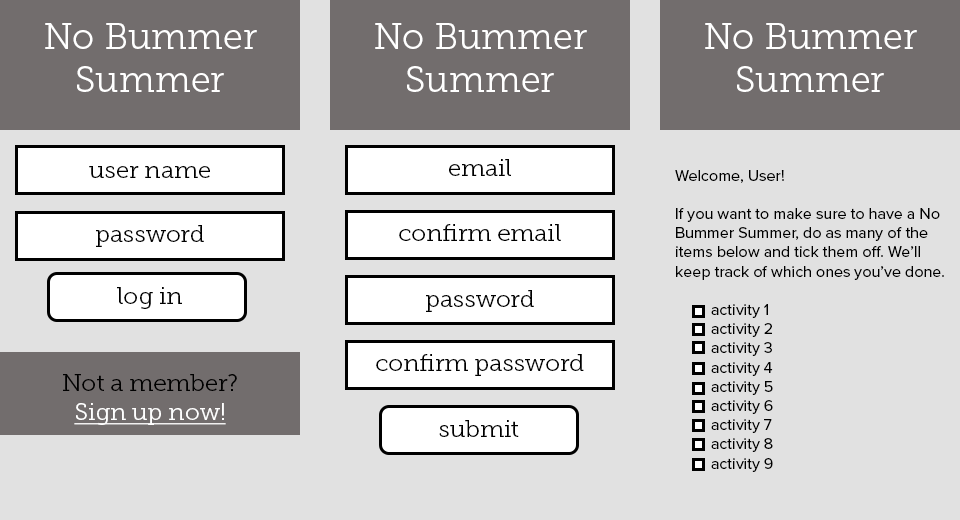
<style>
.page{position:relative;width:960px;height:520px;background:#e1e1e1}
.page>*{position:absolute;margin:0}
.t1{font:36px "MuseoSlab-300";color:#ffffff}
.t2{font:24px "MuseoSlab-300";color:#000000}
.t3{font:16px "ProximaNova-Regular";color:#000000}
</style>
<div class="page">
<p class="t1" style="left:45px;top:23px;width:212px;height:69px;text-align:center">No Bummer<br>Summer</p>
<p class="t1" style="left:375px;top:23px;width:212px;height:69px;text-align:center">No Bummer<br>Summer</p>
<p class="t1" style="left:705px;top:23px;width:212px;height:69px;text-align:center">No Bummer<br>Summer</p>
<p class="t2" style="left:449px;top:159px;width:62px;height:17px">email</p>
<p class="t2" style="left:89px;top:166px;width:121px;height:12px">user name</p>
<p class="t3" style="left:675px;top:170px;width:269px;height:302px">Welcome, User!<br><br>If you want to make sure to have a No Bummer Summer, do as many of the items below and tick them off. We’ll keep track of which ones you’ve done.<br><br> activity 1<br> activity 2<br> activity 3<br> activity 4<br> activity 5<br> activity 6<br> activity 7<br> activity 8<br> activity 9</p>
<p class="t2" style="left:96px;top:225px;width:108px;height:22px">password</p>
<p class="t2" style="left:399px;top:224px;width:162px;height:17px">confirm email</p>
<p class="t2" style="left:117px;top:287px;width:65px;height:22px">log in</p>
<p class="t2" style="left:426px;top:290px;width:108px;height:22px">password</p>
<p class="t2" style="left:376px;top:354px;width:208px;height:22px">confirm password</p>
<p class="t2" style="left:439px;top:420px;width:80px;height:17px">submit</p>
</div>
